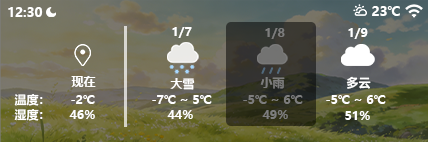
<style>
.page{position:relative;width:428px;height:142px}
.page>*{position:absolute;margin:0}
.t1{font:13px "MicrosoftYaHei-Bold";color:#ffffff}
.t2{font:12.8px "MicrosoftYaHei-Bold";color:#ffffff}
.t3{font:12px "MicrosoftYaHei-Bold";color:#ffffff}
.t4{font:12px "MicrosoftYaHei-Bold";color:#7d7d7d}
</style>
<div class="page">
<p class="t1" style="left:372px;top:6px;width:28px;height:10px">23℃</p>
<p class="t2" style="left:8px;top:7px;width:35px;height:10px">12:30</p>
<p class="t3" style="left:172px;top:27px;width:20px;height:11px">1/7</p>
<p class="t4" style="left:265px;top:28px;width:20px;height:11px">1/8</p>
<p class="t3" style="left:348px;top:28px;width:20px;height:11px">1/9</p>
<p class="t3" style="left:71px;top:76px;width:25px;height:11px">现在</p>
<p class="t3" style="left:170px;top:78px;width:25px;height:12px">大雪</p>
<p class="t4" style="left:260px;top:77px;width:25px;height:12px">小雨</p>
<p class="t3" style="left:346px;top:76px;width:25px;height:13px">多云</p>
<p class="t3" style="left:14px;top:94px;width:29px;height:12px">温度：</p>
<p class="t3" style="left:71px;top:95px;width:24px;height:9px">-2℃</p>
<p class="t3" style="left:152px;top:95px;width:60px;height:9px">-7℃ ~ 5℃</p>
<p class="t4" style="left:243px;top:95px;width:60px;height:9px">-5℃ ~ 6℃</p>
<p class="t3" style="left:326px;top:95px;width:60px;height:9px">-5℃ ~ 6℃</p>
<p class="t3" style="left:14px;top:109px;width:29px;height:12px">湿度：</p>
<p class="t3" style="left:69px;top:110px;width:26px;height:9px">46%</p>
<p class="t3" style="left:167px;top:110px;width:26px;height:9px">44%</p>
<p class="t4" style="left:262px;top:110px;width:26px;height:9px">49%</p>
<p class="t3" style="left:345px;top:111px;width:25px;height:9px">51%</p>
</div>
